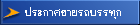
<style>
.page{position:relative;width:140px;height:25px}
.page>*{position:absolute;margin:0}
.t1{font:15.3px "EucrosiaDSE";color:#ffffff;scale:1.12 1}
</style>
<div class="page">
<p class="t1" style="left:25px;top:7px;width:96px;height:12px">»ÃÐ¡ÒÈ¢ÒÂÃ¶ºÃÃ·Ø¡</p>
</div>
